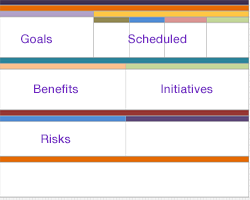
<style>
.page{position:relative;width:250px;height:200px;background:#ffffff}
.page>*{position:absolute;margin:0}
.t1{font:12px "HelveticaNeue-Medium";color:#7026c3}
</style>
<div class="page">
<p class="t1" style="left:21px;top:34px;width:31px;height:10px">Goals</p>
<p class="t1" style="left:128px;top:34px;width:59px;height:10px">Scheduled</p>
<p class="t1" style="left:34px;top:84px;width:44px;height:10px">Benefits</p>
<p class="t1" style="left:161px;top:84px;width:52px;height:10px">Initiatives</p>
<p class="t1" style="left:41px;top:134px;width:30px;height:10px">Risks</p>
</div>
